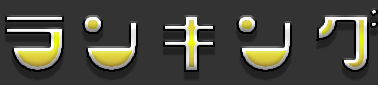
<style>
.page{position:relative;width:378px;height:85px;background:#333333}
.page>*{position:absolute;margin:0}
.t1{font:75px "AB-Manga_thic";font-weight:bold}
</style>
<div class="page">
<p class="t1" style="left:5px;top:8px;width:373px;height:64px">ランキング</p>
</div>
